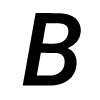
<style>
.page{position:relative;width:100px;height:100px;background:#ffffff}
.page>*{position:absolute;margin:0}
.t1{font:102px "Roboto-MediumItalic";color:#000000}
</style>
<div class="page">
<p class="t1" style="left:22px;top:13px;width:60px;height:73px">B</p>
</div>
